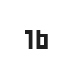
<style>
.page{position:relative;width:74px;height:74px;background:#ffffff}
.page>*{position:absolute;margin:0}
.t1{font:30px "04b24";color:#1f1f1f}
</style>
<div class="page">
<p class="t1" style="left:25px;top:30px;width:23px;height:19px">16</p>
</div>
